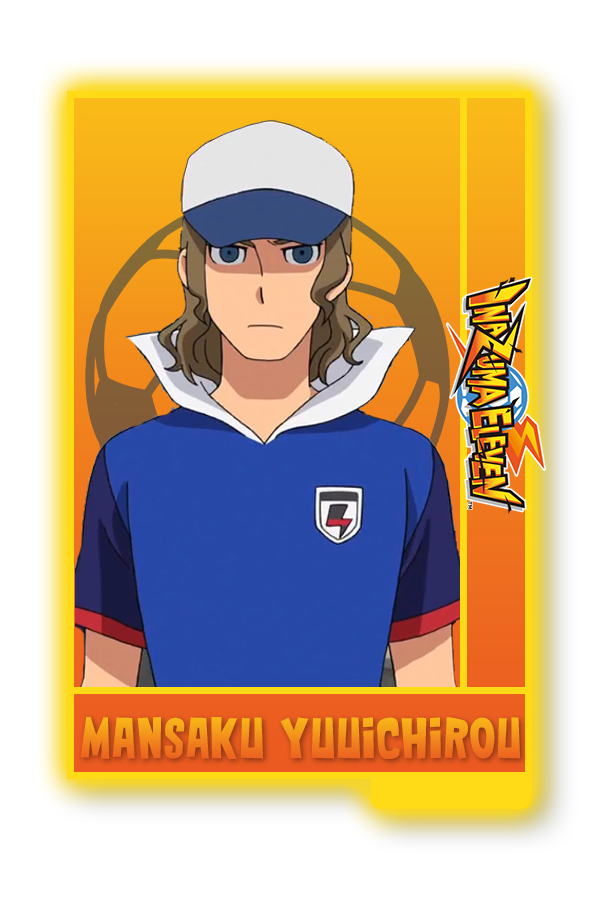
<style>
.page{position:relative;width:600px;height:900px;background:#ffffff}
.page>*{position:absolute;margin:0}
.t1{font:60.3px "TTG-Bold"}
</style>
<div class="page">
<p class="t1" style="left:80px;top:717px;width:441px;height:42px">Mansaku Yuuichirou</p>
</div>
